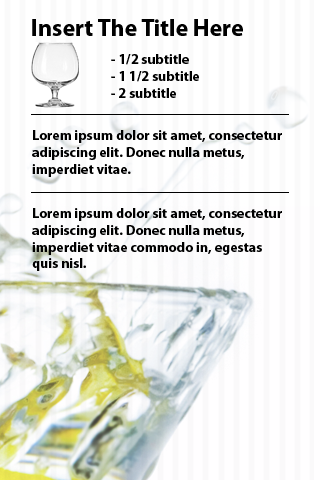
<style>
.page{position:relative;width:320px;height:480px}
.page>*{position:absolute;margin:0}
.t1{font:24px "MyriadPro-Bold";color:#000000}
.t2{font:14px "MyriadPro-Bold";color:#000000}
</style>
<div class="page">
<p class="t1" style="left:32px;top:19px;width:211px;height:17px">Insert The Title Here</p>
<p class="t2" style="left:111px;top:54px;width:88px;height:44px">- 1/2 subtitle<br>- 1 1/2 subtitle<br>- 2 subtitle</p>
<p class="t2" style="left:32px;top:130px;width:250px;height:47px">Lorem ipsum dolor sit amet, consectetur adipiscing elit. Donec nulla metus, imperdiet vitae.</p>
<p class="t2" style="left:32px;top:208px;width:250px;height:63px">Lorem ipsum dolor sit amet, consectetur adipiscing elit. Donec nulla metus, imperdiet vitae commodo in, egestas quis nisl.</p>
</div>
